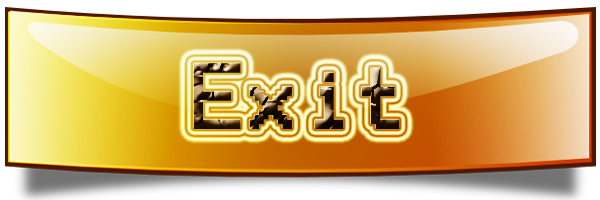
<style>
.page{position:relative;width:600px;height:200px}
.page>*{position:absolute;margin:0}
.t1{font:75px "Terminal"}
</style>
<div class="page">
<p class="t1" style="left:193px;top:63px;width:207px;height:66px">Exit</p>
</div>
